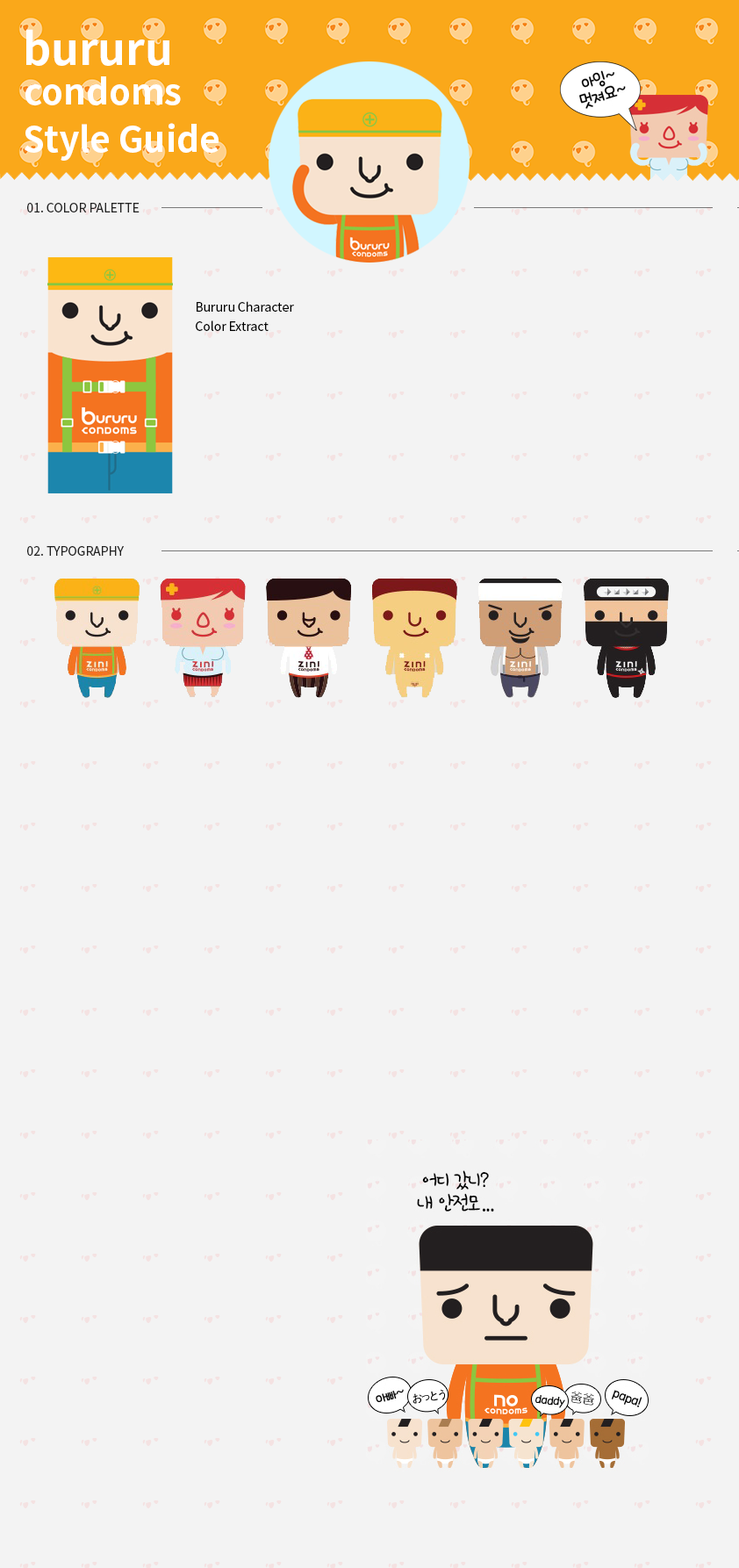
<style>
.page{position:relative;width:739px;height:1568px;background:#f3f3f3}
.page>*{position:absolute;margin:0}
.t1{font:43.9px "NotoSansKR-Bold";color:#ffffff}
.t2{font:35.1px "NotoSansKR-Bold";color:#ffffff}
.t3{font:12.3px "NotoSansKR-Regular";color:#222222}
.t4{font:12.3px/19.3px "NotoSansKR-Regular";color:#000000}
</style>
<div class="page">
<p class="t1" style="left:26px;top:29px;width:143px;height:37px">bururu</p>
<p class="t2" style="left:25px;top:76px;width:156px;height:29px">condoms</p>
<p class="t2" style="left:24px;top:123px;width:195px;height:38px">Style Guide</p>
<p class="t3" style="left:27px;top:203px;width:113px;height:9px">01. COLOR PALETTE</p>
<p class="t4" style="left:196px;top:301px;width:98px;height:30px">Bururu Character<br>Color Extract</p>
<p class="t3" style="left:27px;top:546px;width:97px;height:10px">02. TYPOGRAPHY</p>
</div>
